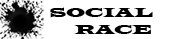
<style>
.page{position:relative;width:170px;height:39px;background:#ffffff}
.page>*{position:absolute;margin:0}
.t1{font:14px "LatinWide";color:#000000}
</style>
<div class="page">
<p class="t1" style="left:50px;top:7px;width:103px;height:27px">SOCIAL<br>      RACE</p>
</div>
